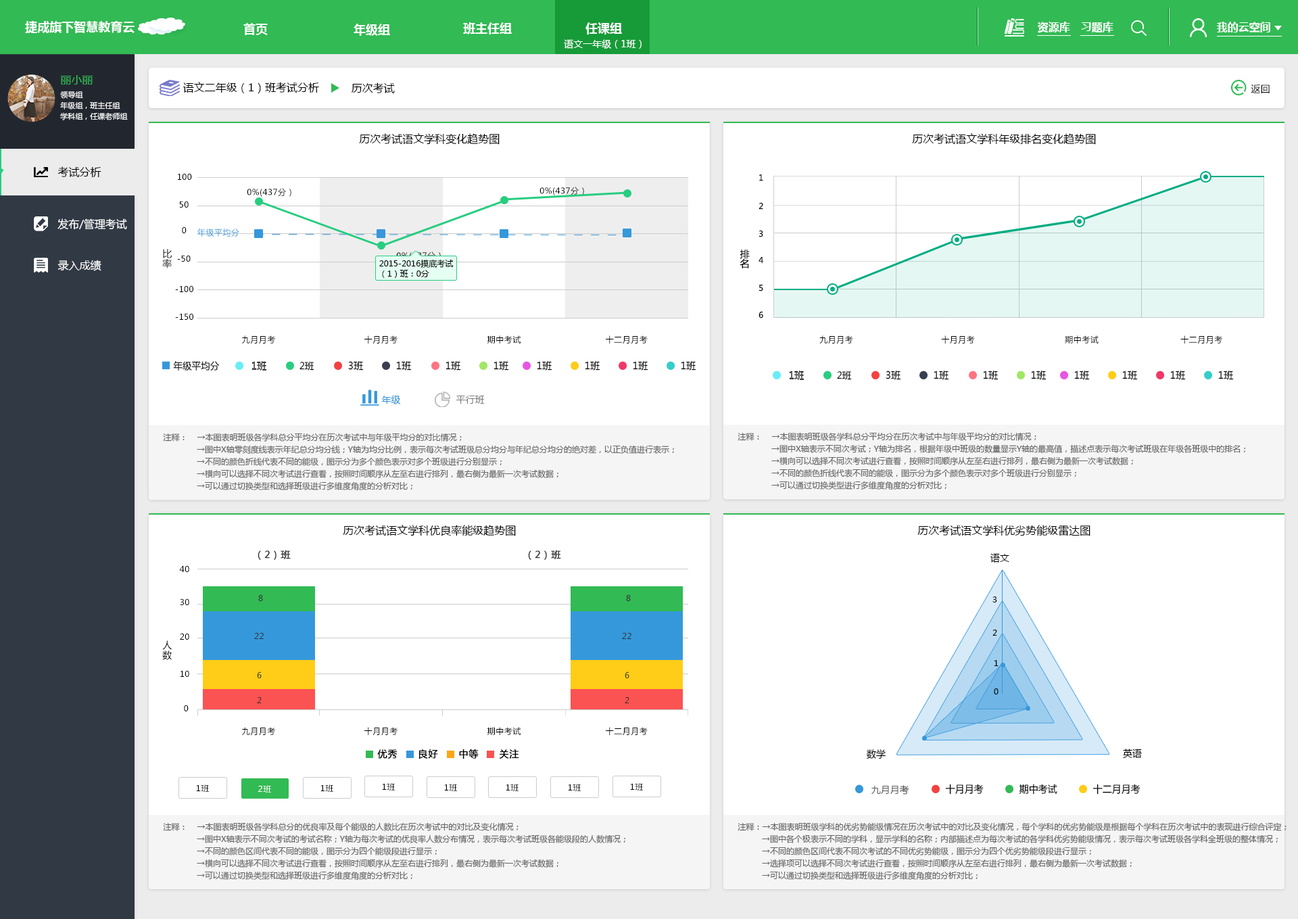
<style>
.page{position:relative;width:1298px;height:919px;background:#ffffff}
.page>*{position:absolute;margin:0}
.t1{font:12.2px "MicrosoftYaHei-Bold";color:#ffffff}
.t2{font:10.8px "MicrosoftYaHei-Bold";color:#ffffff}
.t3{font:9.5px "MicrosoftYaHei";color:#ffffff}
.t4{font:10.8px "MicrosoftYaHei";color:#32ba54}
.t5{font:10.8px "MicrosoftYaHei";color:#000000}
.t6{font:9.5px "MicrosoftYaHei";letter-spacing:0.04em;color:#000000}
.t7{font:7.4px/10.8px "MicrosoftYaHei";color:#ffffff}
.t8{font:8.1px "MicrosoftYaHei";letter-spacing:0.04em;color:#000000}
.t9{font:8.1px "MicrosoftYaHei";color:#000000}
.t10{font:10.8px "MicrosoftYaHei";color:#ffffff}
.t11{font:8.1px "MicrosoftYaHei";letter-spacing:0.04em;color:#3598db}
.t12{font:9.5px/16.2px "MicrosoftYaHei";letter-spacing:0.04em;color:#000000}
.t13{font:8.1px "MicrosoftYaHei";letter-spacing:0.04em}
.t14{font:9.5px "MicrosoftYaHei";color:#000000}
.t15{font:8.1px/10.1px "MicrosoftYaHei";color:#010101}
.t16{font:9.5px "MicrosoftYaHei";color:#000000;scale:0.97 1}
.t17{font:9.8px "MicrosoftYaHei";scale:0.97 1}
.t18{font:9.5px "MicrosoftYaHei";color:#5d5d5d}
.t19{font:9.8px "MicrosoftYaHei";color:#000000;scale:0.97 1}
.t20{font:9.5px "MicrosoftYaHei";color:#3598db}
.t21{font:9.5px "MicrosoftYaHei";color:#7c7c7c}
.t22{font:8.1px/12.2px "MicrosoftYaHei";color:#666666}
.t23{font:9.5px "MicrosoftYaHei";letter-spacing:0.04em;color:#333333;font-weight:bold}
.t24{font:8.1px "MicrosoftYaHei";letter-spacing:0.04em;color:#333333}
.t25{font:9.5px "MicrosoftYaHei";letter-spacing:0.04em;color:#000000;font-weight:bold}
.t26{font:8.1px "MicrosoftYaHei";letter-spacing:0.04em;color:#ffffff}
</style>
<div class="page">
<p class="t1" style="left:25px;top:21px;width:110px;height:12px">捷成旗下智慧教育云</p>
<p class="t1" style="left:243px;top:23px;width:25px;height:12px">首页</p>
<p class="t1" style="left:354px;top:24px;width:36px;height:12px">年级组</p>
<p class="t1" style="left:463px;top:22px;width:49px;height:12px">班主任组</p>
<p class="t1" style="left:585px;top:22px;width:37px;height:12px">任课组</p>
<p class="t2" style="left:1038px;top:22px;width:32px;height:11px">资源库</p>
<p class="t2" style="left:1081px;top:22px;width:32px;height:11px">习题库</p>
<p class="t2" style="left:1217px;top:22px;width:53px;height:10px">我的云空间</p>
<p class="t3" style="left:564px;top:39px;width:78px;height:10px">语文一年级（1班）</p>
<p class="t4" style="left:60px;top:75px;width:33px;height:10px">丽小丽</p>
<p class="t5" style="left:183px;top:82px;width:136px;height:11px">语文二年级（1）班考试分析</p>
<p class="t5" style="left:352px;top:82px;width:43px;height:11px">历次考试</p>
<p class="t6" style="left:1251px;top:84px;width:19px;height:9px">返回</p>
<p class="t7" style="left:60px;top:91px;width:68px;height:29px">领导组<br>年级组，班主任组<br>学科组，任课老师组</p>
<p class="t5" style="left:359px;top:133px;width:141px;height:12px">历次考试语文学科变化趋势图</p>
<p class="t5" style="left:912px;top:133px;width:184px;height:12px">历次考试语文学科年级排名变化趋势图</p>
<p class="t5" style="left:57px;top:166px;width:44px;height:11px">考试分析</p>
<p class="t8" style="left:178px;top:173px;width:14px;height:7px">100</p>
<p class="t9" style="left:759px;top:174px;width:4px;height:7px">1</p>
<p class="t8" style="left:247px;top:188px;width:44px;height:9px">0%(437分）</p>
<p class="t8" style="left:539px;top:187px;width:45px;height:8px">0%(437分）</p>
<p class="t8" style="left:179px;top:201px;width:10px;height:7px">50</p>
<p class="t9" style="left:758px;top:202px;width:5px;height:8px">2</p>
<p class="t10" style="left:57px;top:218px;width:70px;height:12px">发布/管理考试</p>
<p class="t8" style="left:182px;top:226px;width:5px;height:7px">0</p>
<p class="t11" style="left:197px;top:228px;width:42px;height:9px">年级平均分</p>
<p class="t9" style="left:759px;top:230px;width:4px;height:7px">3</p>
<p class="t12" style="left:162px;top:249px;width:10px;height:19px">比率</p>
<p class="t8" style="left:177px;top:255px;width:14px;height:7px">-50</p>
<p class="t13" style="left:396px;top:251px;width:45px;height:9px">0%(437分）</p>
<p class="t14" style="left:740px;top:249px;width:10px;height:19px;text-align:right">排名</p>
<p class="t9" style="left:758px;top:257px;width:5px;height:7px">4</p>
<p class="t10" style="left:57px;top:260px;width:44px;height:11px">录入成绩</p>
<p class="t15" style="left:379px;top:259px;width:75px;height:19px">2015-2016摸底考试<br>（1）班：0分</p>
<p class="t8" style="left:175px;top:285px;width:18px;height:7px">-100</p>
<p class="t9" style="left:759px;top:285px;width:4px;height:6px">5</p>
<p class="t8" style="left:175px;top:313px;width:18px;height:7px">-150</p>
<p class="t9" style="left:758px;top:311px;width:5px;height:7px">6</p>
<p class="t8" style="left:242px;top:335px;width:33px;height:9px">九月月考</p>
<p class="t8" style="left:364px;top:335px;width:33px;height:9px">十月月考</p>
<p class="t8" style="left:487px;top:335px;width:34px;height:8px">期中考试</p>
<p class="t8" style="left:606px;top:335px;width:42px;height:9px">十二月月考</p>
<p class="t8" style="left:819px;top:335px;width:34px;height:9px">九月月考</p>
<p class="t8" style="left:941px;top:335px;width:34px;height:9px">十月月考</p>
<p class="t8" style="left:1065px;top:335px;width:34px;height:8px">期中考试</p>
<p class="t8" style="left:1180px;top:335px;width:42px;height:9px">十二月月考</p>
<p class="t16" style="left:173px;top:360px;width:47px;height:11px">年级平均分</p>
<p class="t17" style="left:251px;top:361px;width:16px;height:9px">1班</p>
<p class="t18" style="left:251px;top:362px;width:15px;height:8px">1班</p>
<p class="t16" style="left:299px;top:361px;width:15px;height:9px">2班</p>
<p class="t19" style="left:348px;top:361px;width:16px;height:9px">3班</p>
<p class="t19" style="left:396px;top:361px;width:16px;height:9px">1班</p>
<p class="t19" style="left:445px;top:361px;width:16px;height:9px">1班</p>
<p class="t19" style="left:493px;top:361px;width:16px;height:9px">1班</p>
<p class="t19" style="left:537px;top:361px;width:15px;height:9px">1班</p>
<p class="t19" style="left:585px;top:361px;width:15px;height:9px">1班</p>
<p class="t19" style="left:633px;top:361px;width:15px;height:9px">1班</p>
<p class="t19" style="left:681px;top:361px;width:15px;height:9px">1班</p>
<p class="t17" style="left:789px;top:370px;width:15px;height:10px">1班</p>
<p class="t18" style="left:789px;top:372px;width:15px;height:8px">1班</p>
<p class="t16" style="left:837px;top:370px;width:15px;height:10px">2班</p>
<p class="t19" style="left:886px;top:370px;width:15px;height:10px">3班</p>
<p class="t19" style="left:934px;top:370px;width:15px;height:10px">1班</p>
<p class="t19" style="left:983px;top:370px;width:15px;height:10px">1班</p>
<p class="t19" style="left:1031px;top:370px;width:15px;height:10px">1班</p>
<p class="t19" style="left:1074px;top:370px;width:16px;height:10px">1班</p>
<p class="t19" style="left:1122px;top:370px;width:16px;height:10px">1班</p>
<p class="t19" style="left:1170px;top:370px;width:16px;height:10px">1班</p>
<p class="t19" style="left:1218px;top:370px;width:16px;height:10px">1班</p>
<p class="t20" style="left:381px;top:395px;width:20px;height:9px">年级</p>
<p class="t21" style="left:456px;top:395px;width:29px;height:9px">平行班</p>
<p class="t22" style="left:163px;top:433px;width:511px;height:57px">注释：    →本图表明班级各学科总分平均分在历次考试中与年级平均分的对比情况；<br>              →图中X轴零刻度线表示年纪总分均分线；Y轴为均分比例，表示每次考试班级总分均分与年纪总分均分的绝对差，以正负值进行表示；<br>              →不同的颜色折线代表不同的能级，图示分为多个颜色表示对多个班级进行分别显示；<br>              →横向可以选择不同次考试进行查看，按照时间顺序从左至右进行排列，最右侧为最新一次考试数据；<br>              →可以通过切换类型和选择班级进行多维度角度的分析对比；</p>
<p class="t22" style="left:738px;top:432px;width:508px;height:57px">注释：    →本图表明班级各学科总分平均分在历次考试中与年级平均分的对比情况；<br>              →图中X轴表示不同次考试；Y轴为排名，根据年级中班级的数量显示Y轴的最高值，描述点表示每次考试班级在年级各班级中的排名；<br>              →横向可以选择不同次考试进行查看，按照时间顺序从左至右进行排列，最右侧为最新一次考试数据；<br>              →不同的颜色折线代表不同的能级，图示分为多个颜色表示对多个班级进行分别显示；<br>              →可以通过切换类型进行多维度角度的分析对比；</p>
<p class="t5" style="left:343px;top:525px;width:173px;height:11px">历次考试语文学科优良率能级趋势图</p>
<p class="t5" style="left:917px;top:525px;width:173px;height:11px">历次考试语文学科优劣势能级雷达图</p>
<p class="t23" style="left:258px;top:550px;width:33px;height:10px">（2）班</p>
<p class="t23" style="left:528px;top:550px;width:33px;height:10px">（2）班</p>
<p class="t14" style="left:990px;top:553px;width:19px;height:9px">语文</p>
<p class="t8" style="left:179px;top:565px;width:10px;height:7px">40</p>
<p class="t8" style="left:180px;top:598px;width:9px;height:7px">30</p>
<p class="t24" style="left:258px;top:594px;width:5px;height:7px">8</p>
<p class="t24" style="left:626px;top:594px;width:5px;height:7px">8</p>
<p class="t9" style="left:992px;top:596px;width:5px;height:6px">3</p>
<p class="t9" style="left:992px;top:629px;width:5px;height:6px">2</p>
<p class="t12" style="left:162px;top:640px;width:10px;height:20px">人数</p>
<p class="t8" style="left:180px;top:633px;width:9px;height:7px">20</p>
<p class="t24" style="left:254px;top:632px;width:10px;height:7px">22</p>
<p class="t24" style="left:622px;top:632px;width:9px;height:7px">22</p>
<p class="t9" style="left:994px;top:660px;width:4px;height:6px">1</p>
<p class="t8" style="left:180px;top:670px;width:9px;height:7px">10</p>
<p class="t24" style="left:257px;top:671px;width:5px;height:7px">6</p>
<p class="t24" style="left:625px;top:671px;width:4px;height:7px">6</p>
<p class="t9" style="left:994px;top:688px;width:4px;height:6px">0</p>
<p class="t24" style="left:257px;top:696px;width:5px;height:7px">2</p>
<p class="t24" style="left:625px;top:696px;width:4px;height:7px">2</p>
<p class="t8" style="left:184px;top:704px;width:5px;height:7px">0</p>
<p class="t8" style="left:242px;top:727px;width:33px;height:9px">九月月考</p>
<p class="t8" style="left:364px;top:727px;width:33px;height:9px">十月月考</p>
<p class="t8" style="left:487px;top:727px;width:34px;height:8px">期中考试</p>
<p class="t8" style="left:606px;top:727px;width:42px;height:9px">十二月月考</p>
<p class="t25" style="left:377px;top:749px;width:20px;height:9px">优秀</p>
<p class="t25" style="left:418px;top:749px;width:20px;height:9px">良好</p>
<p class="t25" style="left:459px;top:749px;width:20px;height:9px">中等</p>
<p class="t25" style="left:499px;top:749px;width:20px;height:9px">关注</p>
<p class="t14" style="left:867px;top:749px;width:19px;height:10px">数学</p>
<p class="t14" style="left:1123px;top:748px;width:19px;height:10px">英语</p>
<p class="t8" style="left:196px;top:784px;width:13px;height:8px">1班</p>
<p class="t26" style="left:258px;top:785px;width:13px;height:8px">2班</p>
<p class="t8" style="left:320px;top:784px;width:13px;height:8px">1班</p>
<p class="t8" style="left:382px;top:783px;width:13px;height:8px">1班</p>
<p class="t8" style="left:444px;top:784px;width:13px;height:8px">1班</p>
<p class="t8" style="left:506px;top:784px;width:13px;height:8px">1班</p>
<p class="t8" style="left:568px;top:784px;width:13px;height:8px">1班</p>
<p class="t8" style="left:630px;top:783px;width:13px;height:8px">1班</p>
<p class="t18" style="left:871px;top:785px;width:38px;height:9px">九月月考</p>
<p class="t19" style="left:945px;top:784px;width:39px;height:10px">十月月考</p>
<p class="t19" style="left:1019px;top:784px;width:38px;height:10px">期中考试</p>
<p class="t19" style="left:1092px;top:784px;width:48px;height:10px">十二月月考</p>
<p class="t22" style="left:163px;top:822px;width:462px;height:57px">注释：    →本图表明班级各学科总分的优良率及每个能级的人数比在历次考试中的对比及变化情况；<br>              →图中X轴表示不同次考试的考试名称；Y轴为每次考试的优良率人数分布情况，表示每次考试班级各能级段的人数情况；<br>              →不同的颜色区间代表不同的能级，图示分为四个能级段进行显示；<br>              →横向可以选择不同次考试进行查看，按照时间顺序从左至右进行排列，最右侧为最新一次考试数据；<br>              →可以通过切换类型和选择班级进行多维度角度的分析对比；</p>
<p class="t22" style="left:738px;top:822px;width:548px;height:57px">注释：→本图表明班级学科的优劣势能级情况在历次考试中的对比及变化情况，每个学科的优劣势能级是根据每个学科在历次考试中的表现进行综合评定；<br>          →图中各个极表示不同的学科，显示学科的名称；内部描述点为每次考试的各学科优劣势能级情况，表示每次考试班级各学科全班级的整体情况；<br>          →不同的颜色区间代表不同次考试的不同优劣势能级，图示分为四个优劣势能级段进行显示；<br>          →选择项可以选择不同次考试进行查看，按照时间顺序从左至右进行排列，最右侧为最新一次考试数据；<br>          →可以通过切换类型和选择班级进行多维度角度的分析对比；</p>
</div>
